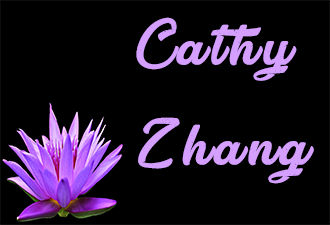
<style>
.page{position:relative;width:330px;height:225px;background:#000000}
.page>*{position:absolute;margin:0}
.t1{font:75px/100px "Atlantic-Bentley";letter-spacing:0.075em;color:#d49fff}
</style>
<div class="page">
<p class="t1" style="left:136px;top:17px;width:178px;height:167px;text-align:center">Cathy <br>Zhang</p>
</div>
